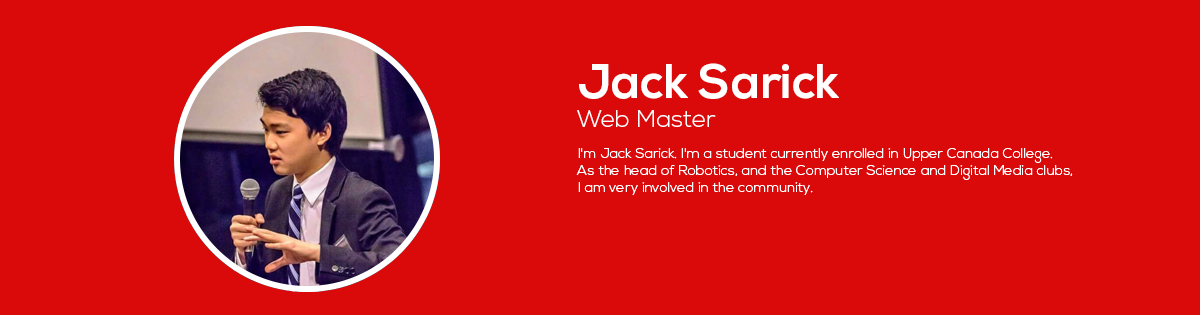
<style>
.page{position:relative;width:1200px;height:315px;background:#db0a0a}
.page>*{position:absolute;margin:0}
.t1{font:14px "NexaLight";color:#ffffff}
.t2{font:48px "NexaBold";color:#ffffff}
.t3{font:24px "NexaLight";color:#ffffff}
</style>
<div class="page">
<p class="t1" style="left:576px;top:63px;width:497px;height:132px"><span class="t2">Jack Sarick<br></span><span class="t3">Web Master<br><br></span>I'm Jack Sarick. I'm a student currently enrolled in Upper Canada College. <br>As the head of Robotics, and the Computer Science and Digital Media clubs, <br>I am very involved in the community.</p>
</div>
